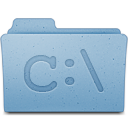
<style>
.page{position:relative;width:128px;height:128px;background:#ffffff}
.page>*{position:absolute;margin:0}
.t1{font:61.9px "CourierNewPS-BoldMT";letter-spacing:-0.125em;color:#7099b9}
.t2{font:61.9px "CourierNewPS-BoldMT";letter-spacing:-0.2em;color:#7099b9}
.t3{font:53.1px "CourierNewPS-BoldMT";letter-spacing:-0.1em;color:#7099b9}
</style>
<div class="page">
<p class="t1" style="left:24px;top:49px;width:80px;height:43px">C<span class="t2">:</span><span class="t3">\</span></p>
</div>
